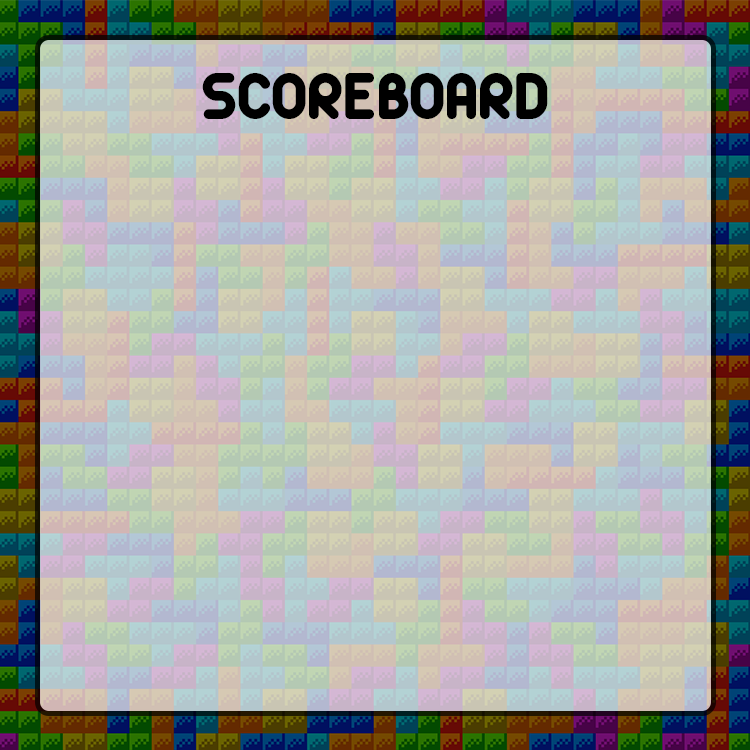
<style>
.page{position:relative;width:750px;height:750px}
.page>*{position:absolute;margin:0}
.t1{font:72px "zArista";color:#000000;text-transform:uppercase}
</style>
<div class="page">
<p class="t1" style="left:202px;top:73px;width:346px;height:46px">Scoreboard</p>
</div>
